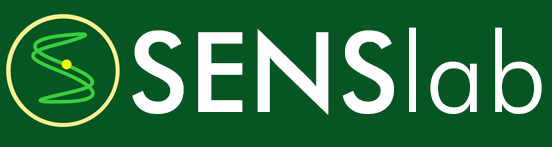
<style>
.page{position:relative;width:552px;height:147px;background:#055622}
.page>*{position:absolute;margin:0}
.t1{font:111.1px "FuturaBT-Medium";letter-spacing:0.01em;color:#ffffff}
.t2{font:111.1px "FuturaBT-Light";letter-spacing:0.01em;color:#ffffff}
</style>
<div class="page">
<p class="t1" style="left:132px;top:27px;width:410px;height:88px">SENS<span class="t2">lab</span></p>
</div>
